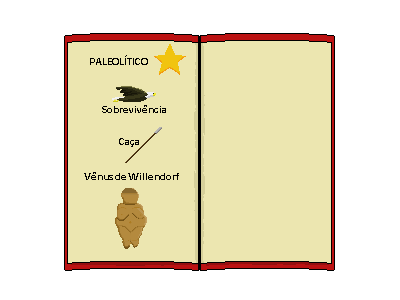
<style>
.page{position:relative;width:400px;height:300px;background:#ffffff}
.page>*{position:absolute;margin:0}
.t1{font:11px "Calibri-Bold";color:#010101}
</style>
<div class="page">
<p class="t1" style="left:90px;top:55px;width:58px;height:10px">PALEOLÍTICO</p>
<p class="t1" style="left:102px;top:105px;width:64px;height:8px">Sobrevivência</p>
<p class="t1" style="left:119px;top:138px;width:20px;height:9px">Caça</p>
<p class="t1" style="left:84px;top:172px;width:95px;height:8px">Vênus de Willendorf</p>
</div>
